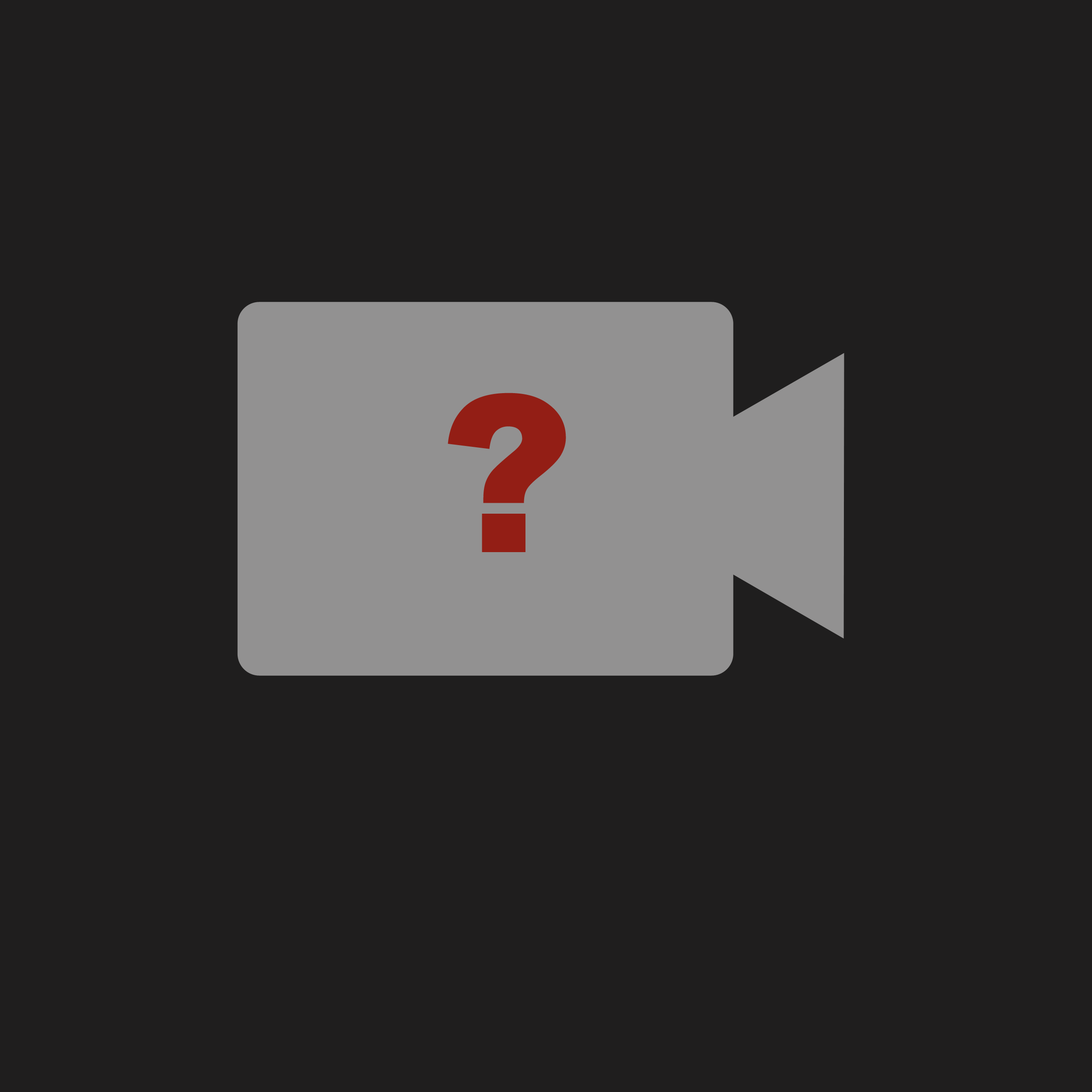
<style>
.page{position:relative;width:1092px;height:1092px;background:#1f1e1e}
.page>*{position:absolute;margin:0}
.t1{font:218.4px "Arial-Black";color:#931e15}
</style>
<div class="page">
<p class="t1" style="left:448px;top:393px;width:118px;height:159px">?</p>
</div>
